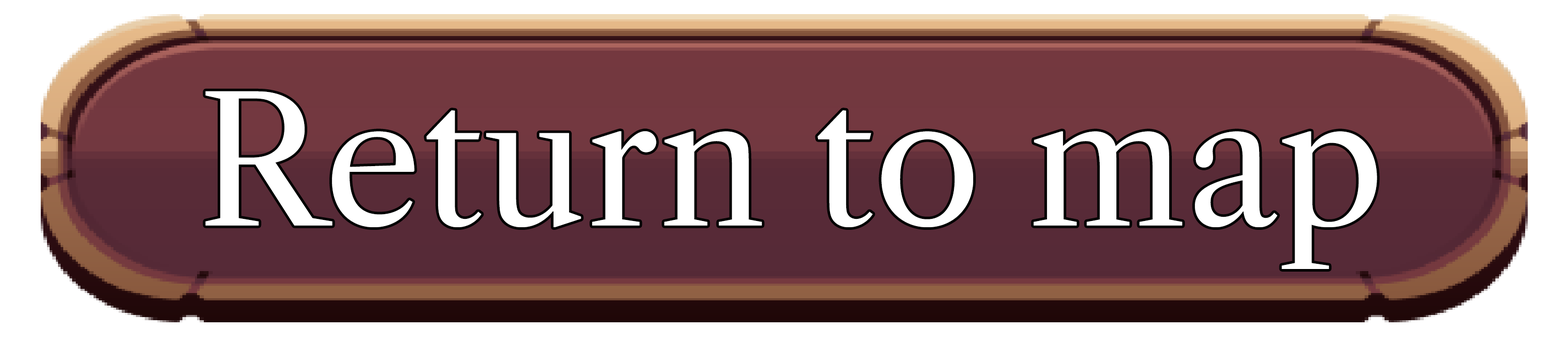
<style>
.page{position:relative;width:1568px;height:339px;background:#ffffff}
.page>*{position:absolute;margin:0}
.t1{font:174.2px "LibreCaslonText-Regular";color:#ffffff}
</style>
<div class="page">
<p class="t1" style="left:205px;top:91px;width:1172px;height:178px">Return to map</p>
</div>
